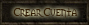
<style>
.page{position:relative;width:89px;height:25px}
.page>*{position:absolute;margin:0}
.t1{font:11px "Morpheus";color:#331e03}
</style>
<div class="page">
<p class="t1" style="left:13px;top:7px;width:65px;height:11px">Crear Cuenta</p>
</div>
